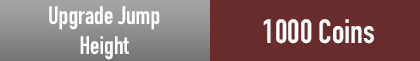
<style>
.page{position:relative;width:420px;height:61px;background:#692c2c}
.page>*{position:absolute;margin:0}
.t1{font:25px "DINCondensed-Bold";color:#ffffff}
.t2{font:33.3px "DINCondensed-Bold";color:#ffffff}
</style>
<div class="page">
<p class="t1" style="left:49px;top:6px;width:111px;height:54px;text-align:center">Upgrade Jump<br>Height</p>
<p class="t2" style="left:263px;top:19px;width:111px;height:25px">1000 Coins</p>
</div>
